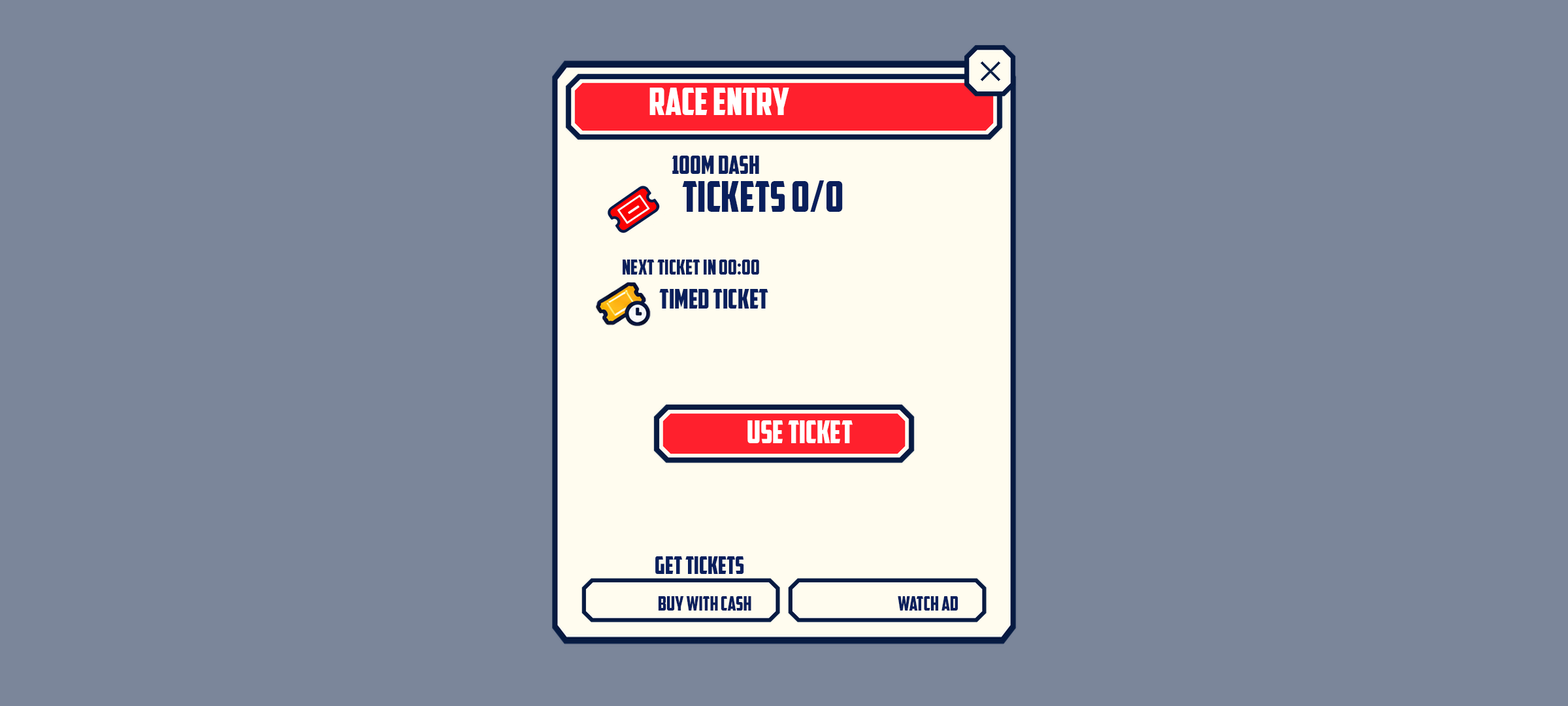
<style>
.page{position:relative;width:1568px;height:706px;background:#7b869a}
.page>*{position:absolute;margin:0}
.t1{font:37.9px "AmericanCaptain";color:#ffffff}
.t2{font:25.5px "AmericanCaptain";color:#0a1f5c}
.t3{font:42.3px "AmericanCaptain";color:#0a1f5c}
.t4{font:20.9px "AmericanCaptain";color:#0a1f5c}
.t5{font:26.8px "AmericanCaptain";color:#0a1f5c}
.t6{font:31.4px "AmericanCaptain";color:#ffffff}
.t7{font:24.2px "AmericanCaptain";color:#0a1f5c}
.t8{font:19.6px "AmericanCaptain";color:#0a1f5c}
</style>
<div class="page">
<p class="t1" style="left:649px;top:88px;width:140px;height:27px">RACE ENTRY</p>
<p class="t2" style="left:672px;top:155px;width:87px;height:19px">100m dash</p>
<p class="t3" style="left:682px;top:180px;width:161px;height:32px">Tickets 0/0</p>
<p class="t4" style="left:623px;top:259px;width:136px;height:15px">Next ticket in 00:00</p>
<p class="t5" style="left:659px;top:289px;width:109px;height:19px">Timed Ticket</p>
<p class="t6" style="left:747px;top:420px;width:106px;height:23px">USE TICKET</p>
<p class="t7" style="left:655px;top:556px;width:89px;height:18px">GET TICKETS</p>
<p class="t8" style="left:658px;top:596px;width:93px;height:14px">BUY WITH CASH</p>
<p class="t8" style="left:898px;top:596px;width:60px;height:14px">WATCH AD</p>
</div>
